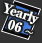
<style>
.page{position:relative;width:42px;height:43px;background:#333333}
.page>*{position:absolute;margin:0}
.t1{font:13px/14px "RyuminPro-ExBold";letter-spacing:-0.08em;color:#ffffff;font-weight:bold}
.t2{font:13px/14px "RyuminPro-ExBold";color:#ffffff;font-weight:bold}
.t3{font:13px/14px "TimesNewRomanPSMT";color:#ffffff;font-weight:bold}
</style>
<div class="page">
<p class="t1" style="left:3px;top:2px;width:36px;height:32px;text-align:center;rotate:19deg">Yearly<br><span class="t2">  06 </span><span class="t3">~</span></p>
</div>
